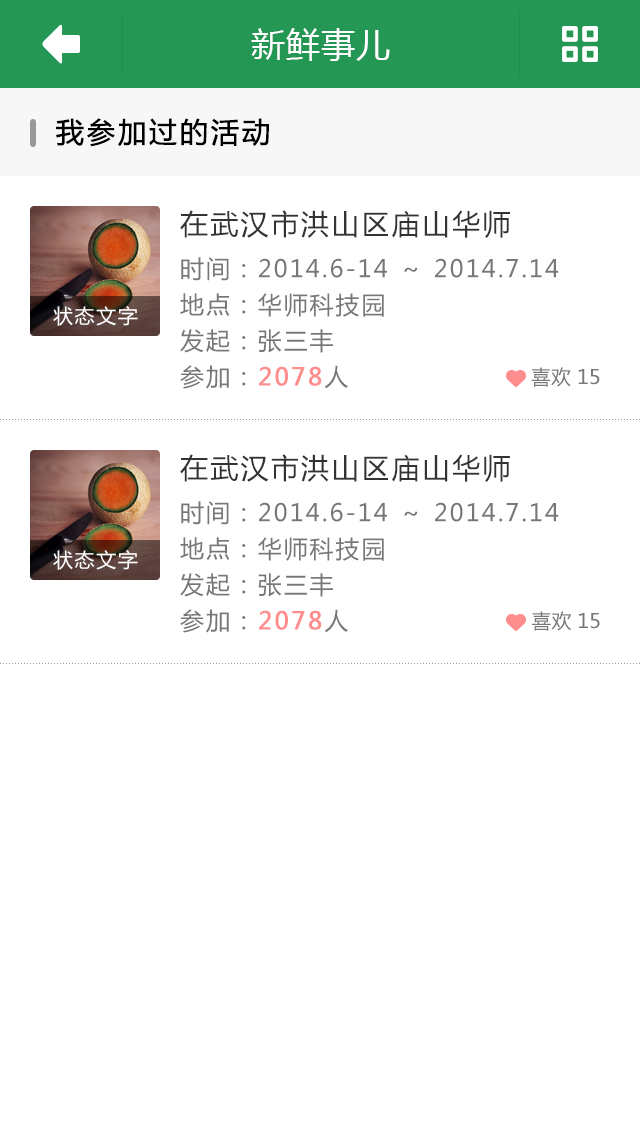
<style>
.page{position:relative;width:640px;height:1136px;background:#ffffff}
.page>*{position:absolute;margin:0}
.t1{font:28px "MicrosoftYaHei";letter-spacing:0.08em;color:#000000;font-weight:bold}
.t2{font:28px "MicrosoftYaHei";letter-spacing:0.08em;color:#333333}
.t3{font:24px/36px "MicrosoftYaHei";letter-spacing:0.08em;color:#777777}
.t4{font:24px/36px "MicrosoftYaHei";letter-spacing:0.08em;color:#fe8e8e;font-weight:bold}
.t5{font:20px "MicrosoftYaHei";letter-spacing:0.08em;color:#ffffff}
.t6{font:20px "MicrosoftYaHei";color:#777777}
</style>
<div class="page">
<p class="t1" style="left:56px;top:118px;width:213px;height:29px">我参加过的活动</p>
<p class="t2" style="left:180px;top:210px;width:330px;height:28px">在武汉市洪山区庙山华师</p>
<p class="t3" style="left:180px;top:257px;width:379px;height:132px;text-align:justify">时间：2014.6-14 ～ 2014.7.14<br>地点：华师科技园<br>发起：张三丰<br>参加：<span class="t4">2078</span>人</p>
<p class="t5" style="left:53px;top:306px;width:85px;height:20px">状态文字</p>
<p class="t6" style="left:531px;top:367px;width:69px;height:20px">喜欢 15</p>
<p class="t2" style="left:180px;top:454px;width:330px;height:28px">在武汉市洪山区庙山华师</p>
<p class="t3" style="left:180px;top:501px;width:379px;height:132px;text-align:justify">时间：2014.6-14 ～ 2014.7.14<br>地点：华师科技园<br>发起：张三丰<br>参加：<span class="t4">2078</span>人</p>
<p class="t5" style="left:53px;top:550px;width:85px;height:20px">状态文字</p>
<p class="t6" style="left:532px;top:611px;width:68px;height:20px">喜欢 15</p>
</div>
